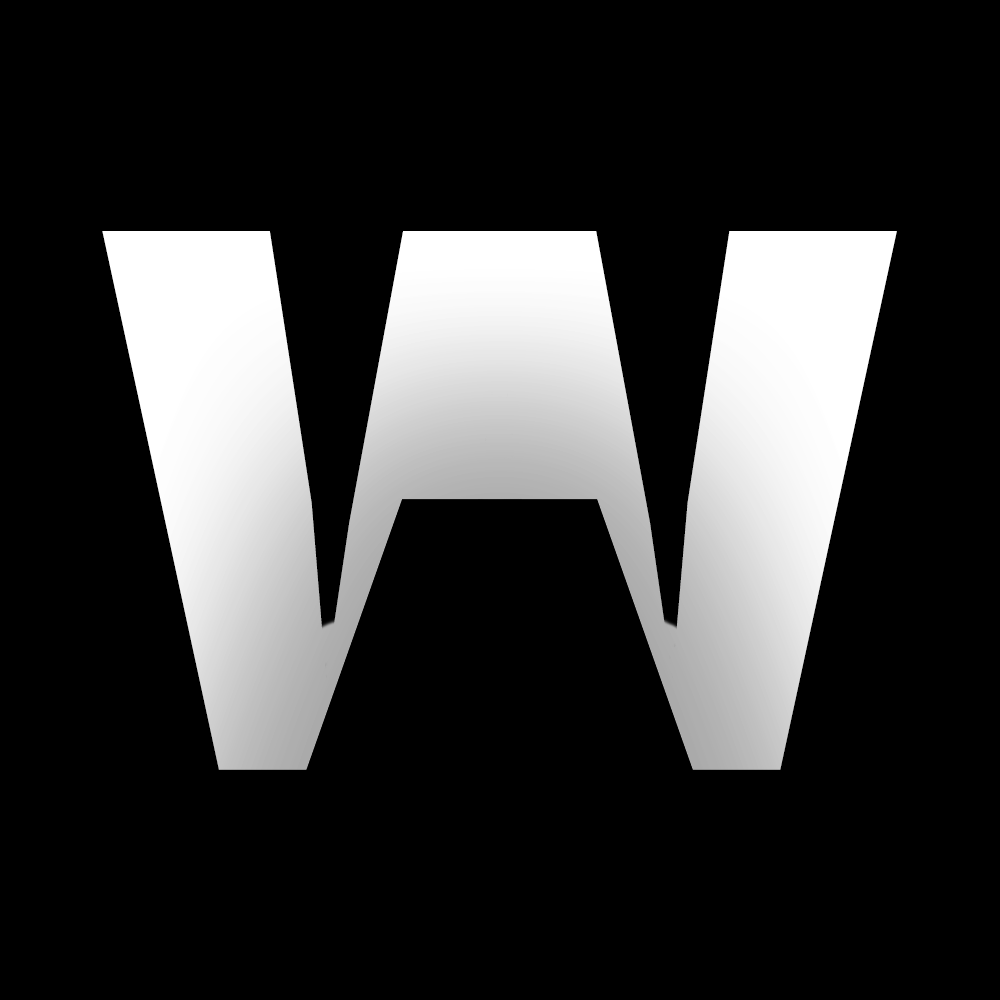
<style>
.page{position:relative;width:1000px;height:1000px;background:#000000}
.page>*{position:absolute;margin:0}
.t1{font:803.8px "CabinetGrotesk-Black"}
</style>
<div class="page">
<p class="t1" style="left:102px;top:231px;width:795px;height:539px">W</p>
</div>
